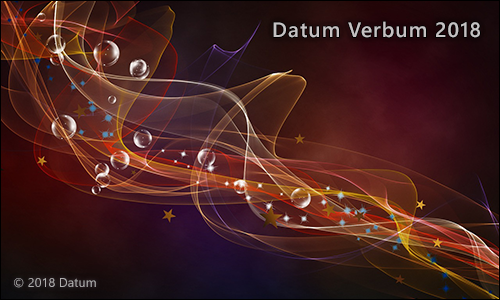
<style>
.page{position:relative;width:500px;height:300px}
.page>*{position:absolute;margin:0}
.t1{font:20.8px "SegoeUI-Semibold";letter-spacing:0.05em;color:#c6c2c3}
.t2{font:12.5px "SegoeUI";letter-spacing:0.01em;color:#b0afaf}
</style>
<div class="page">
<p class="t1" style="left:273px;top:21px;width:207px;height:17px">Datum Verbum 2018</p>
<p class="t2" style="left:14px;top:278px;width:82px;height:10px">© 2018 Datum</p>
</div>
